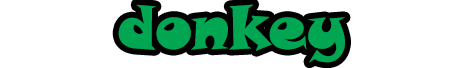
<style>
.page{position:relative;width:464px;height:68px;background:#ffffff}
.page>*{position:absolute;margin:0}
.t1{font:60px "SnapITC-Regular";color:#00a651}
</style>
<div class="page">
<p class="t1" style="left:118px;top:4px;width:227px;height:59px">donkey</p>
</div>
